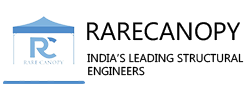
<style>
.page{position:relative;width:250px;height:100px;background:#ffffff}
.page>*{position:absolute;margin:0}
.t1{font:25px "MicrosoftPhagsPa";color:#000000}
.t2{font:11.3px "MicrosoftPhagsPa";color:#000000}
</style>
<div class="page">
<p class="t1" style="left:87px;top:22px;width:153px;height:19px">RARECANOPY</p>
<p class="t2" style="left:87px;top:53px;width:157px;height:23px">INDIA’S LEADING STRUCTURAL <br>ENGINEERS</p>
</div>
